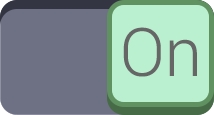
<style>
.page{position:relative;width:214px;height:115px;background:#6e7184}
.page>*{position:absolute;margin:0}
.t1{font:66.7px "Roboto-Light";color:#666666}
</style>
<div class="page">
<p class="t1" style="left:123px;top:27px;width:74px;height:50px">On</p>
</div>
